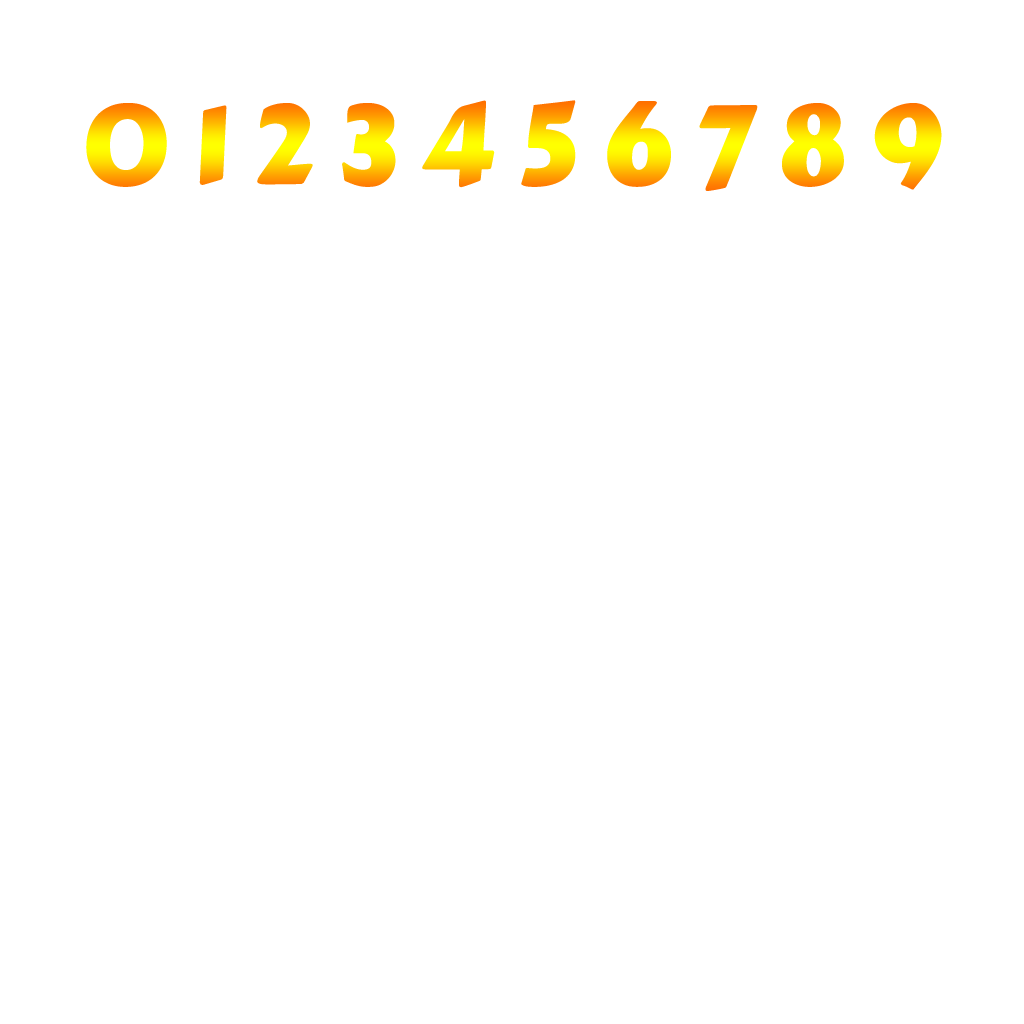
<style>
.page{position:relative;width:1024px;height:1024px;background:#ffffff}
.page>*{position:absolute;margin:0}
.t1{font:111px "CarterOne"}
</style>
<div class="page">
<p class="t1" style="left:86px;top:100px;width:856px;height:91px">0 1 2 3 4 5 6 7 8 9</p>
</div>
